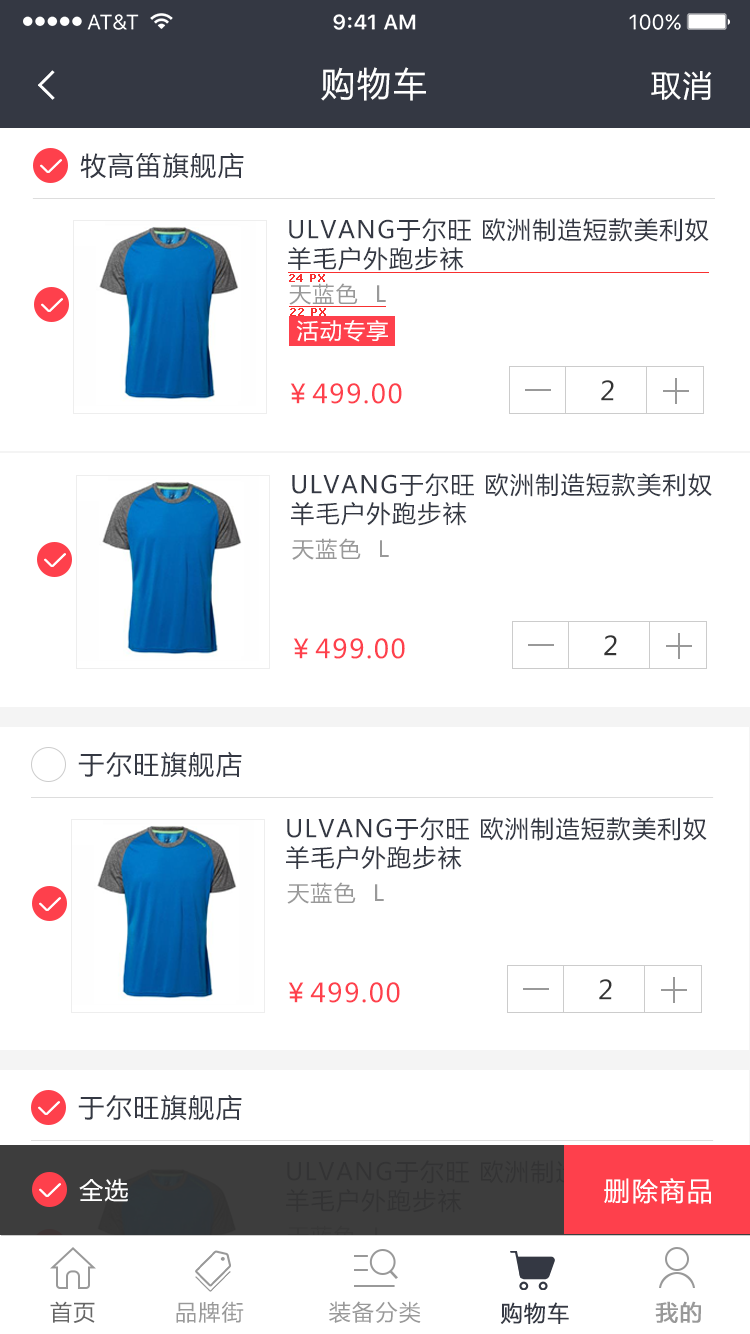
<style>
.page{position:relative;width:750px;height:1334px;background:#ffffff}
.page>*{position:absolute;margin:0}
.t1{font:34px "MicrosoftYaHei";letter-spacing:0.06em;color:#ffffff}
.t2{font:30px "MicrosoftYaHei";letter-spacing:0.06em;color:#ffffff}
.t3{font:26px "MicrosoftYaHei";letter-spacing:0.06em;color:#343843}
.t4{font:24px "MicrosoftYaHei";letter-spacing:0.06em;color:#343843}
.t5{font:11px "Verdana";color:#f83030;font-weight:bold}
.t6{font:22px "MicrosoftYaHei";letter-spacing:0.06em;color:#999999}
.t7{font:22px "MicrosoftYaHei";letter-spacing:0.06em;color:#ffffff}
.t8{font:26px "MicrosoftYaHei";letter-spacing:0.06em;color:#fe404c}
.t9{font:26px "MicrosoftYaHei";letter-spacing:0.06em;color:#333333}
.t10{font:24px "MicrosoftYaHei";letter-spacing:0.06em;color:#ffffff}
.t11{font:26px "MicrosoftYaHei";letter-spacing:0.06em;color:#ffffff}
.t12{font:22px "MicrosoftYaHei";letter-spacing:0.06em;color:#666666}
.t13{font:22px "MicrosoftYaHei";letter-spacing:0.06em;color:#343843}
.t14{font:22px "MicrosoftYaHei";letter-spacing:0.06em;color:#999999;font-weight:bold}
</style>
<div class="page">
<p class="t1" style="left:321px;top:67px;width:105px;height:34px">购物车</p>
<p class="t2" style="left:651px;top:71px;width:61px;height:29px">取消</p>
<p class="t3" style="left:80px;top:152px;width:164px;height:27px">牧高笛旗舰店</p>
<p class="t4" style="left:288px;top:218px;width:421px;height:53px">ULVANG于尔旺 欧洲制造短款美利奴羊毛户外跑步袜</p>
<p class="t5" style="left:289px;top:274px;width:36px;height:8px">24 PX</p>
<p class="t5" style="left:289px;top:274px;width:36px;height:8px">24 PX</p>
<p class="t6" style="left:289px;top:283px;width:97px;height:22px">天蓝色  L</p>
<p class="t5" style="left:290px;top:308px;width:36px;height:8px">22 PX</p>
<p class="t7" style="left:296px;top:320px;width:92px;height:22px">活动专享</p>
<p class="t8" style="left:290px;top:383px;width:112px;height:21px">￥499.00</p>
<p class="t9" style="left:601px;top:380px;width:13px;height:21px">2</p>
<p class="t4" style="left:291px;top:473px;width:421px;height:53px">ULVANG于尔旺 欧洲制造短款美利奴羊毛户外跑步袜</p>
<p class="t6" style="left:292px;top:538px;width:97px;height:22px">天蓝色  L</p>
<p class="t8" style="left:293px;top:638px;width:112px;height:21px">￥499.00</p>
<p class="t9" style="left:604px;top:635px;width:13px;height:21px">2</p>
<p class="t3" style="left:78px;top:751px;width:164px;height:27px">于尔旺旗舰店</p>
<p class="t4" style="left:286px;top:817px;width:421px;height:53px">ULVANG于尔旺 欧洲制造短款美利奴羊毛户外跑步袜</p>
<p class="t6" style="left:287px;top:882px;width:97px;height:22px">天蓝色  L</p>
<p class="t8" style="left:288px;top:982px;width:112px;height:21px">￥499.00</p>
<p class="t9" style="left:599px;top:979px;width:13px;height:21px">2</p>
<p class="t3" style="left:78px;top:1094px;width:164px;height:27px">于尔旺旗舰店</p>
<p class="t10" style="left:79px;top:1178px;width:49px;height:24px">全选</p>
<p class="t11" style="left:604px;top:1178px;width:107px;height:26px">删除商品</p>
<p class="t12" style="left:50px;top:1301px;width:45px;height:22px">首页</p>
<p class="t6" style="left:176px;top:1301px;width:68px;height:22px">品牌街</p>
<p class="t6" style="left:329px;top:1301px;width:92px;height:22px">装备分类</p>
<p class="t13" style="left:500px;top:1302px;width:69px;height:22px">购物车</p>
<p class="t14" style="left:655px;top:1301px;width:46px;height:22px">我的</p>
</div>
